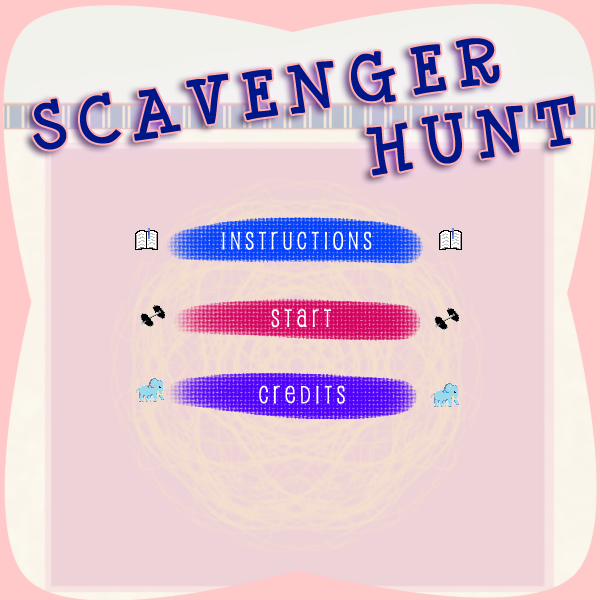
<style>
.page{position:relative;width:600px;height:600px;background:#edd2d7}
.page>*{position:absolute;margin:0}
.t1{font:60px "MinyaNouvelle";letter-spacing:0.2em;color:#001789;font-weight:bold}
.t2{font:24px "Pupcat";letter-spacing:0.2em;color:#ffffff}
</style>
<div class="page">
<p class="t1" style="left:33px;top:38px;width:543px;height:138px;rotate:-8deg">SCAVENGER <br>          HUNT</p>
<p class="t2" style="left:222px;top:231px;width:150px;height:19px">Instructions</p>
<p class="t2" style="left:271px;top:309px;width:60px;height:19px">Start</p>
<p class="t2" style="left:259px;top:385px;width:86px;height:19px">Credits</p>
</div>
